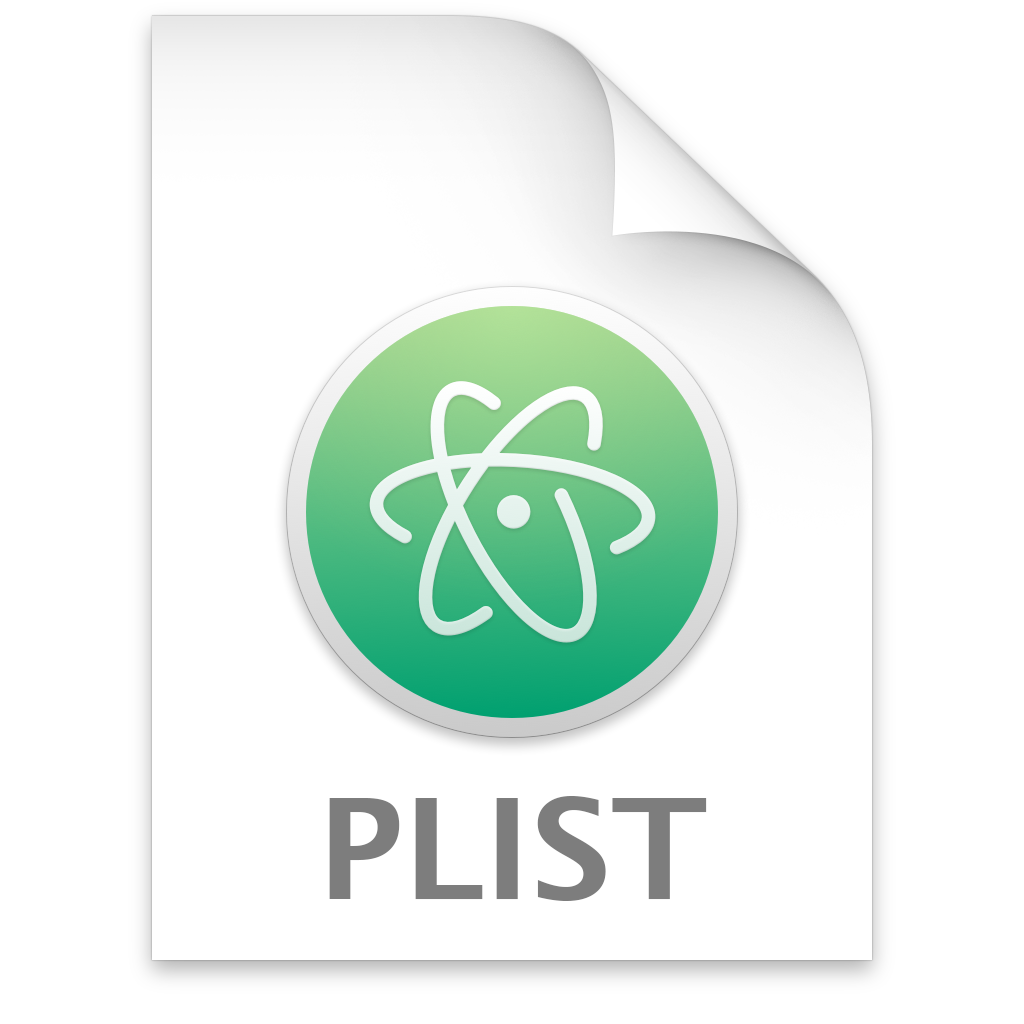
<style>
.page{position:relative;width:1024px;height:1024px;background:#ffffff}
.page>*{position:absolute;margin:0}
.t1{font:140px "LucidaGrande-Bold";color:#7d7d7d}
</style>
<div class="page">
<p class="t1" style="left:329px;top:796px;width:378px;height:105px">PLIST</p>
</div>
